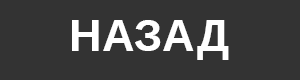
<style>
.page{position:relative;width:300px;height:80px;background:#333333}
.page>*{position:absolute;margin:0}
.t1{font:45px "LiberationSans-Bold";color:#ffffff;text-transform:uppercase}
</style>
<div class="page">
<p class="t1" style="left:72px;top:20px;width:157px;height:40px">назад</p>
</div>
